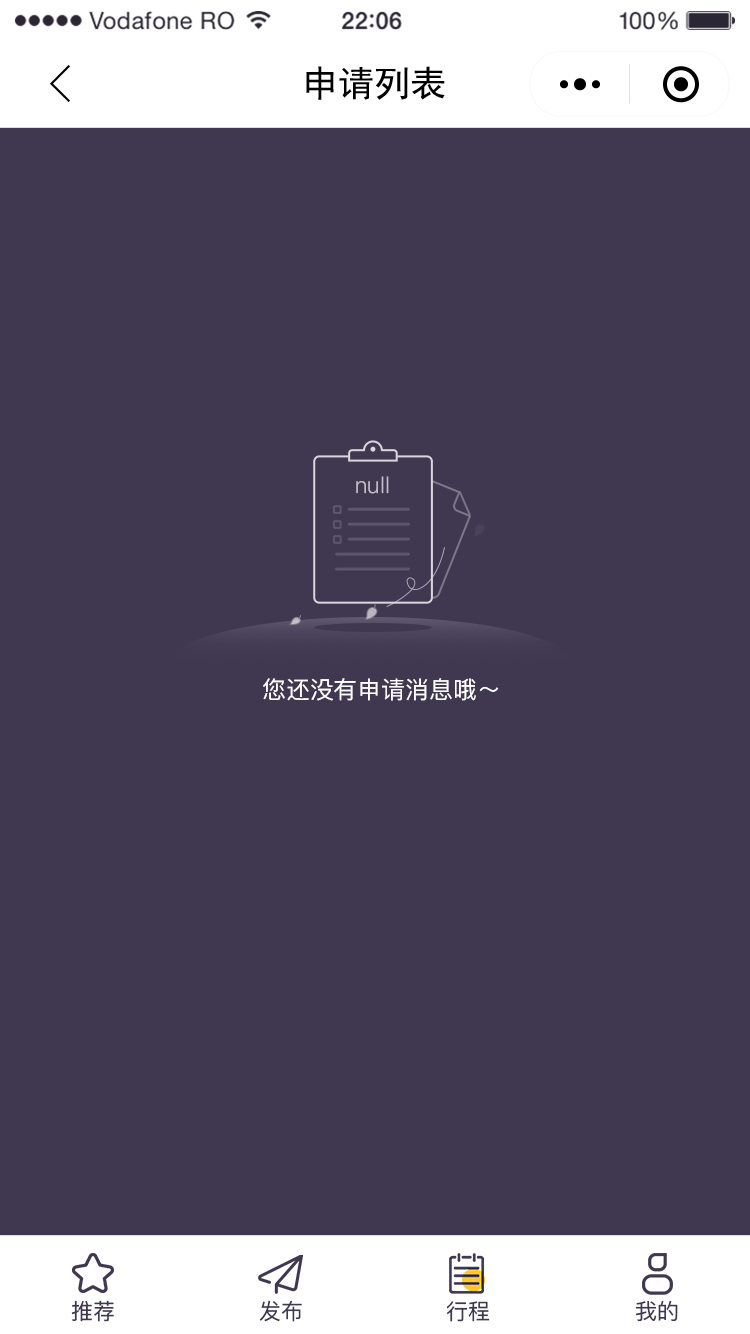
<style>
.page{position:relative;width:750px;height:1334px;background:#403751}
.page>*{position:absolute;margin:0}
.t1{font:36px "SimHei";color:#000000}
.t2{font:22.4px "PingFangSC-Light";color:#c2bfc6}
.t3{font:24px "PingFangSC-Regular";color:#ffffff}
.t4{font:22px "PingFangSC-Regular";color:#403751}
</style>
<div class="page">
<p class="t1" style="left:306px;top:66px;width:139px;height:34px">申请列表</p>
<p class="t2" style="left:356px;top:476px;width:33px;height:18px">null</p>
<p class="t3" style="left:263px;top:678px;width:236px;height:23px">您还没有申请消息哦～</p>
<p class="t4" style="left:71px;top:1300px;width:43px;height:22px">推荐</p>
<p class="t4" style="left:259px;top:1300px;width:43px;height:22px">发布</p>
<p class="t4" style="left:446px;top:1301px;width:44px;height:21px">行程</p>
<p class="t4" style="left:636px;top:1300px;width:42px;height:21px">我的</p>
</div>
